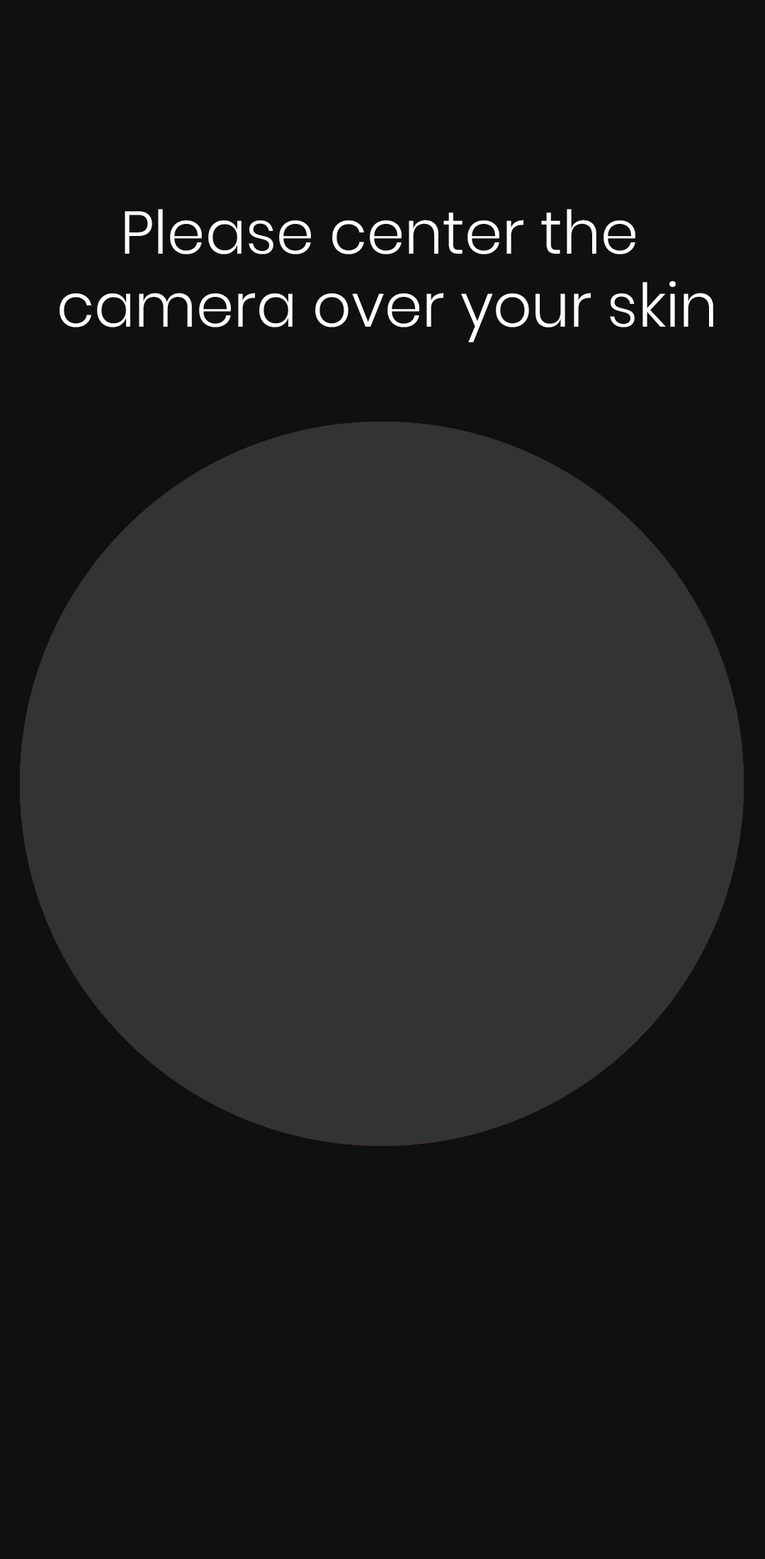
<style>
.page{position:relative;width:765px;height:1559px;background:#101010}
.page>*{position:absolute;margin:0}
.t1{font:60.1px/72.8px "Poppins-Light";color:#fefefe}
</style>
<div class="page">
<p class="t1" style="left:60px;top:209px;width:653px;height:133px;text-align:center">Please center the <br>camera over your skin</p>
</div>
